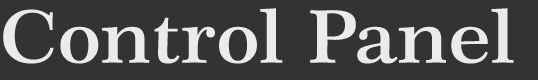
<style>
.page{position:relative;width:538px;height:80px;background:#333333}
.page>*{position:absolute;margin:0}
.t1{font:73.1px "Century751BT-SemiBold";color:#ebebeb;scale:1.09 1}
</style>
<div class="page">
<p class="t1" style="left:3px;top:8px;width:511px;height:56px">Control Panel</p>
</div>
